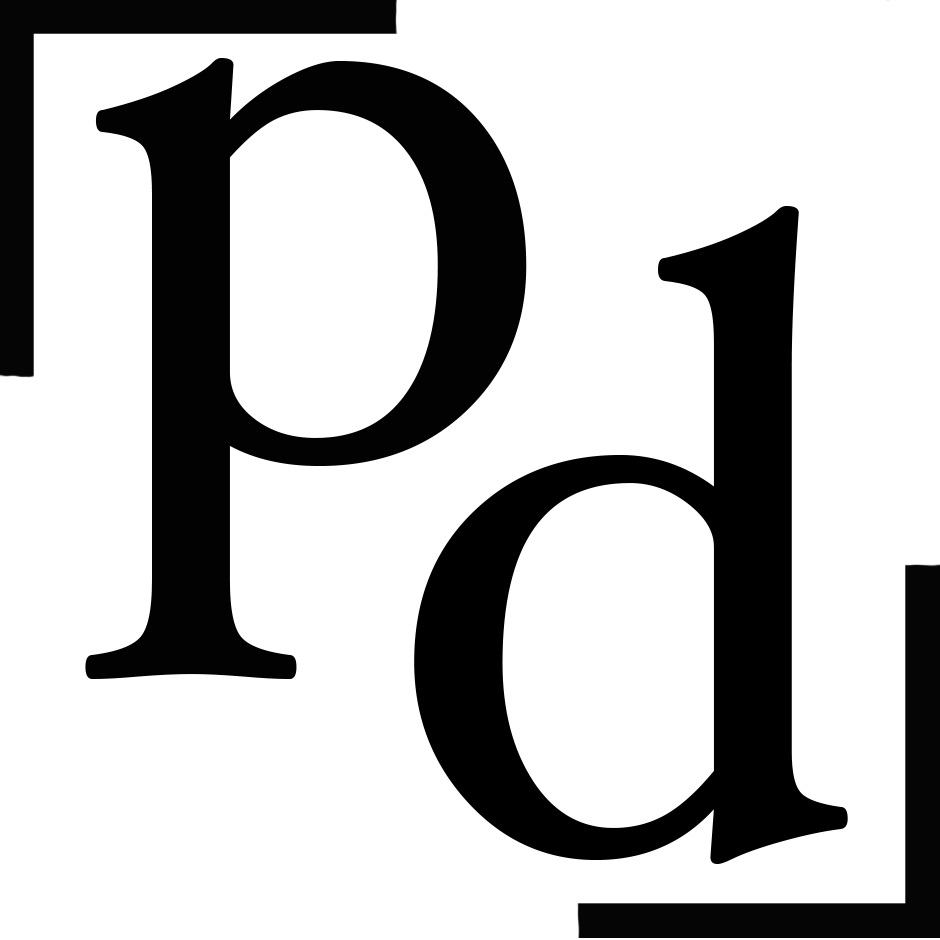
<style>
.page{position:relative;width:940px;height:940px;background:#ffffff}
.page>*{position:absolute;margin:0}
.t1{font:875px "HoeflerText-Regular";color:#020202}
.t2{font:875px "HoeflerText-Regular";color:#000000}
</style>
<div class="page">
<p class="t1" style="left:85px;top:58px;width:442px;height:621px">p</p>
<p class="t2" style="left:414px;top:206px;width:434px;height:658px">d</p>
</div>
